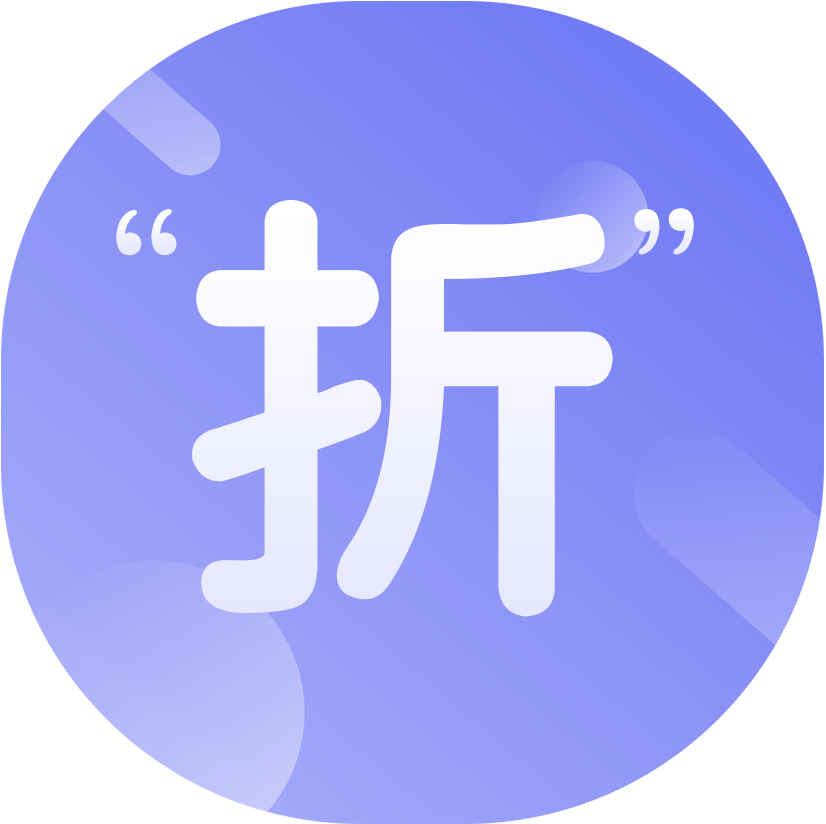
<style>
.page{position:relative;width:826px;height:824px}
.page>*{position:absolute;margin:0}
.t1{font:199.6px "FZY4JW--GB1-0";color:#eeefff}
.t2{font:450px "FZY4JW--GB1-0";color:#f4f4ff}
.t3{font:199.6px "FZY4JW--GB1-0";color:#f7f8ff}
</style>
<div class="page">
<p class="t1" style="left:116px;top:209px;width:61px;height:47px">“</p>
<p class="t2" style="left:192px;top:199px;width:421px;height:418px">折</p>
<p class="t3" style="left:634px;top:208px;width:60px;height:47px">”</p>
</div>
